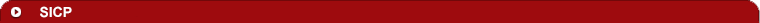
<style>
.page{position:relative;width:760px;height:23px;background:#9e0b0e}
.page>*{position:absolute;margin:0}
.t1{font:14px "Arial-BoldMT";color:#ffffff}
</style>
<div class="page">
<p class="t1" style="left:40px;top:6px;width:32px;height:12px">SICP</p>
</div>
